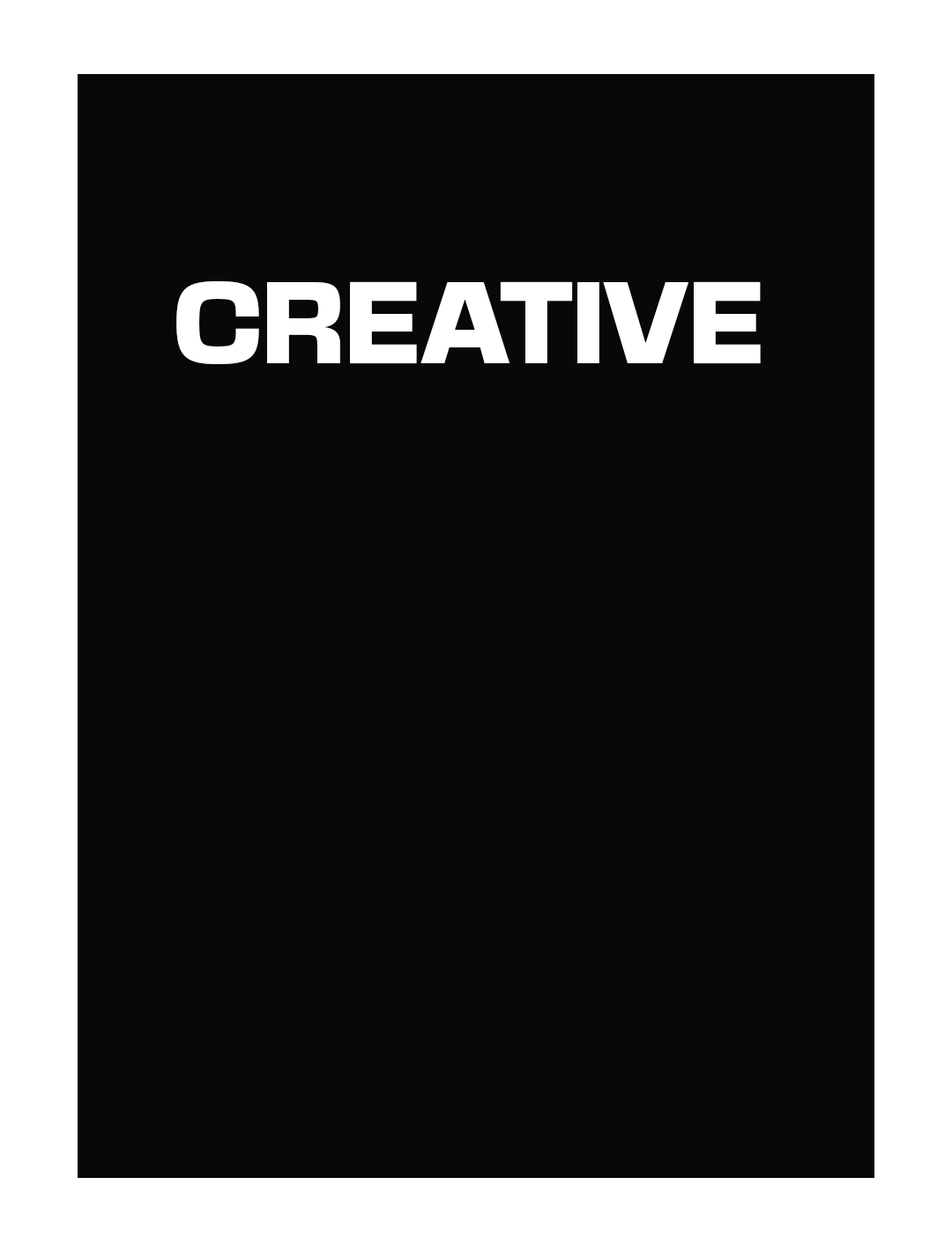
<style>
.page{position:relative;width:952px;height:1252px;background:#080808}
.page>*{position:absolute;margin:0}
.t1{font:103.6px "BasementGrotesque-Black";color:#ffffff}
</style>
<div class="page">
<p class="t1" style="left:176px;top:281px;width:585px;height:83px">CREATIVE</p>
</div>
